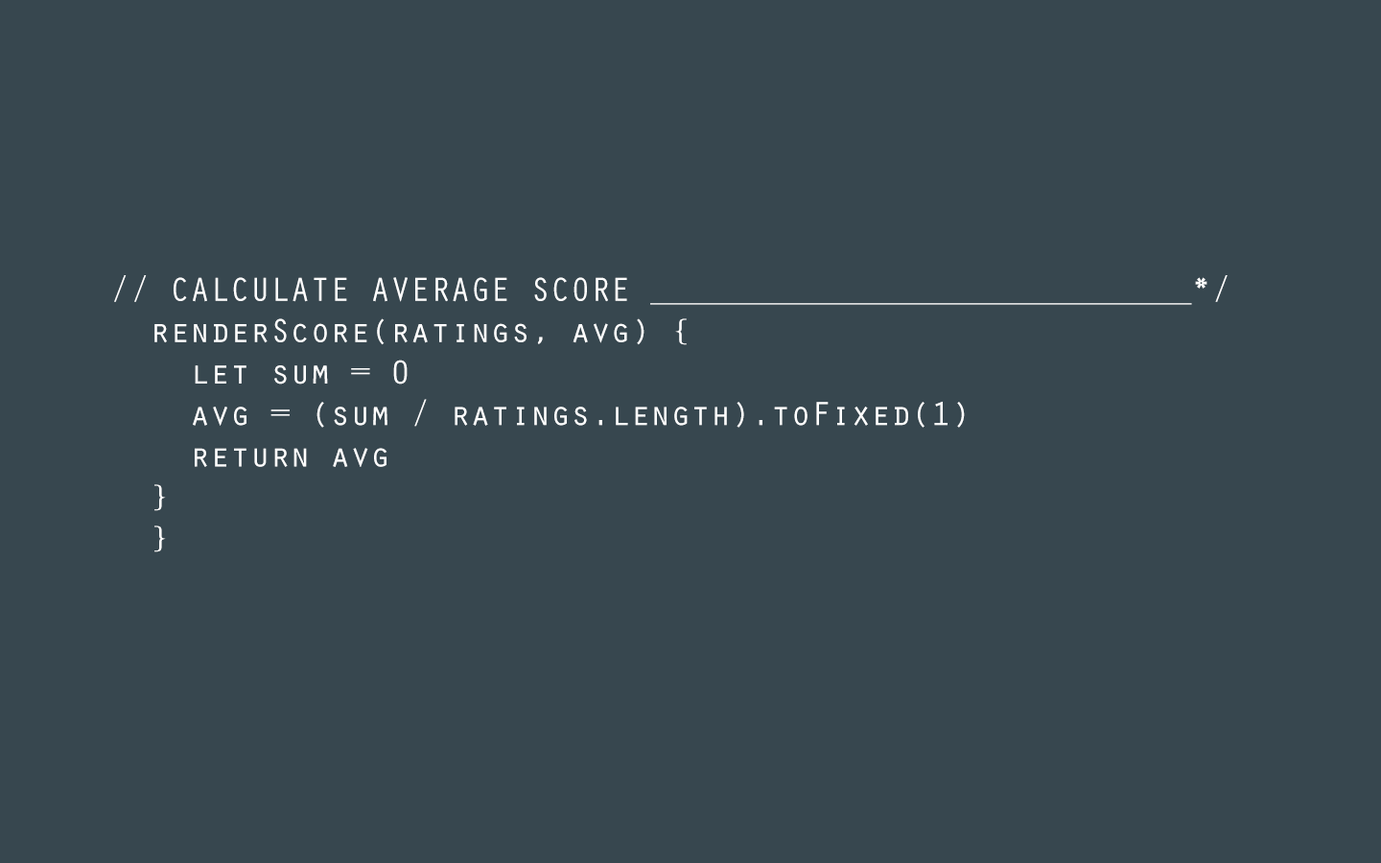
<style>
.page{position:relative;width:1381px;height:863px;background:#37474f}
.page>*{position:absolute;margin:0}
.t1{font:34.5px "OratorStd";letter-spacing:-0.02em;color:#ffffff}
</style>
<div class="page">
<p class="t1" style="left:114px;top:275px;width:1114px;height:278px">// CALCULATE AVERAGE SCORE ___________________________*/<br>  renderScore(ratings, avg) {<br>    let sum = 0<br>    avg = (sum / ratings.length).toFixed(1)<br>    return avg<br>  }<br>  }</p>
</div>
